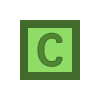
<style>
.page{position:relative;width:100px;height:100px;background:#ffffff}
.page>*{position:absolute;margin:0}
.t1{font:40px "Thonburi-Bold";color:#4f8831}
</style>
<div class="page">
<p class="t1" style="left:38px;top:33px;width:24px;height:33px">C</p>
</div>
